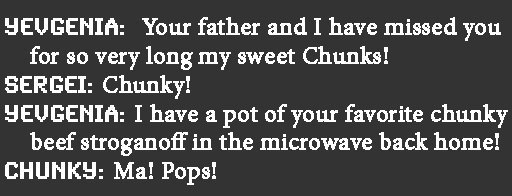
<style>
.page{position:relative;width:512px;height:196px;background:#333333}
.page>*{position:absolute;margin:0}
.t1{font:24px "MinionPro-Regular";color:#ffffff;font-weight:bold}
.t2{font:24px "SynchroLET";color:#ffffff;font-weight:bold}
</style>
<div class="page">
<p class="t1" style="left:5px;top:17px;width:503px;height:168px"><span class="t2">Yevgenia:  </span>Your father and I have missed you <br>    for so very long my sweet Chunks!<br><span class="t2">SERGEI: </span>Chunky!<br><span class="t2">Yevgenia: </span>I have a pot of your favorite chunky<br>    beef stroganoff in the microwave back home!<br><span class="t2">CHUNKY: </span>Ma! Pops!</p>
</div>
